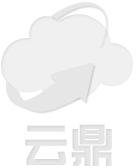
<style>
.page{position:relative;width:140px;height:168px;background:#ffffff}
.page>*{position:absolute;margin:0}
.t1{font:46px "DFZongYi-Bd-80-Win-GB";color:#e6e6e6}
</style>
<div class="page">
<p class="t1" style="left:25px;top:124px;width:87px;height:42px">云鼎</p>
</div>
